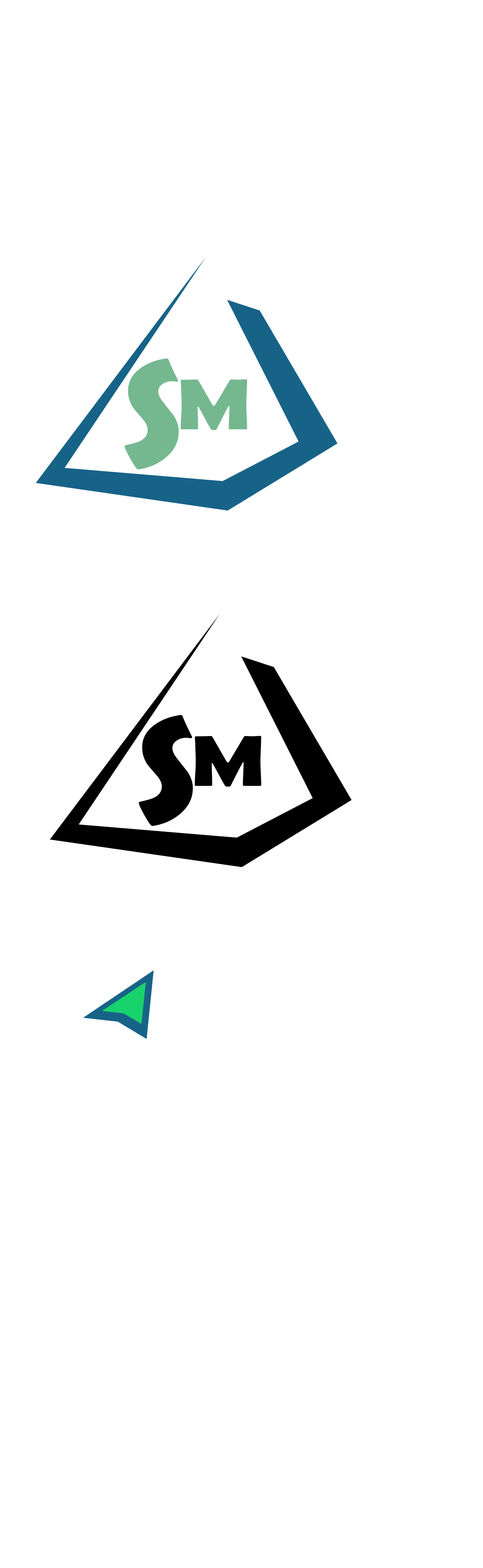
<style>
.page{position:relative;width:483px;height:1568px;background:#ffffff}
.page>*{position:absolute;margin:0}
.t1{font:151.8px "BerlinSansFBDemi-Bold";color:#75b890}
.t2{font:72.3px "BerlinSansFBDemi-Bold";color:#75b890;scale:1.26 1}
.t3{font:151.8px "BerlinSansFBDemi-Bold";color:#000000}
.t4{font:72.3px "BerlinSansFBDemi-Bold";color:#000000;scale:1.26 1}
</style>
<div class="page">
<p class="t1" style="left:124px;top:358px;width:55px;height:111px">S</p>
<p class="t2" style="left:181px;top:379px;width:66px;height:51px">M</p>
<p class="t3" style="left:139px;top:715px;width:54px;height:111px">S</p>
<p class="t4" style="left:195px;top:736px;width:66px;height:51px">M</p>
</div>
